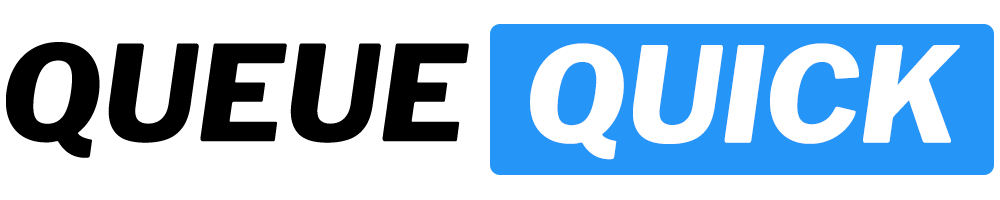
<style>
.page{position:relative;width:1000px;height:200px;background:#ffffff}
.page>*{position:absolute;margin:0}
.t1{font:131.5px "LibreFranklinItalic-ExtraBoldItalic";color:#000000}
.t2{font:131.5px "LibreFranklinItalic-ExtraBoldItalic";color:#ffffff}
</style>
<div class="page">
<p class="t1" style="left:6px;top:42px;width:463px;height:116px">QUEUE</p>
<p class="t2" style="left:530px;top:43px;width:430px;height:117px">QUICK</p>
</div>
